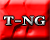
<style>
.page{position:relative;width:50px;height:40px}
.page>*{position:absolute;margin:0}
.t1{font:11.2px "MyungjoXB-HM";scale:1.53 1}
</style>
<div class="page">
<p class="t1" style="left:4px;top:16px;width:42px;height:9px">T-NG</p>
</div>
